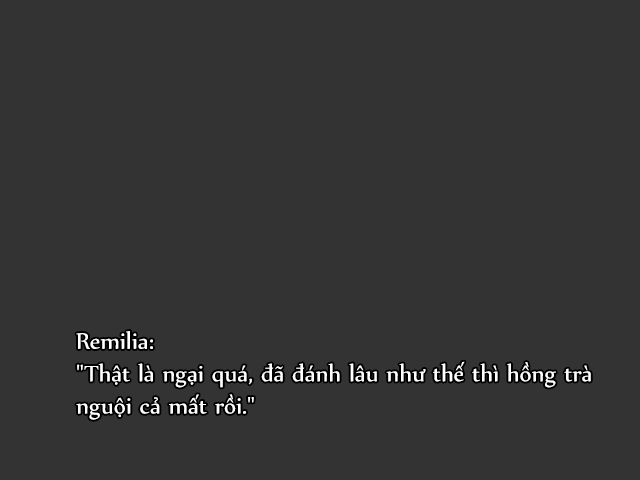
<style>
.page{position:relative;width:640px;height:480px;background:#333333}
.page>*{position:absolute;margin:0}
.t1{font:27px "UTM-Nyala";color:#ffffff}
</style>
<div class="page">
<p class="t1" style="left:76px;top:331px;width:515px;height:89px">Remilia:<br>"Thật là ngại quá, đã đánh lâu như thế thì hồng trà nguội cả mất rồi."</p>
</div>
